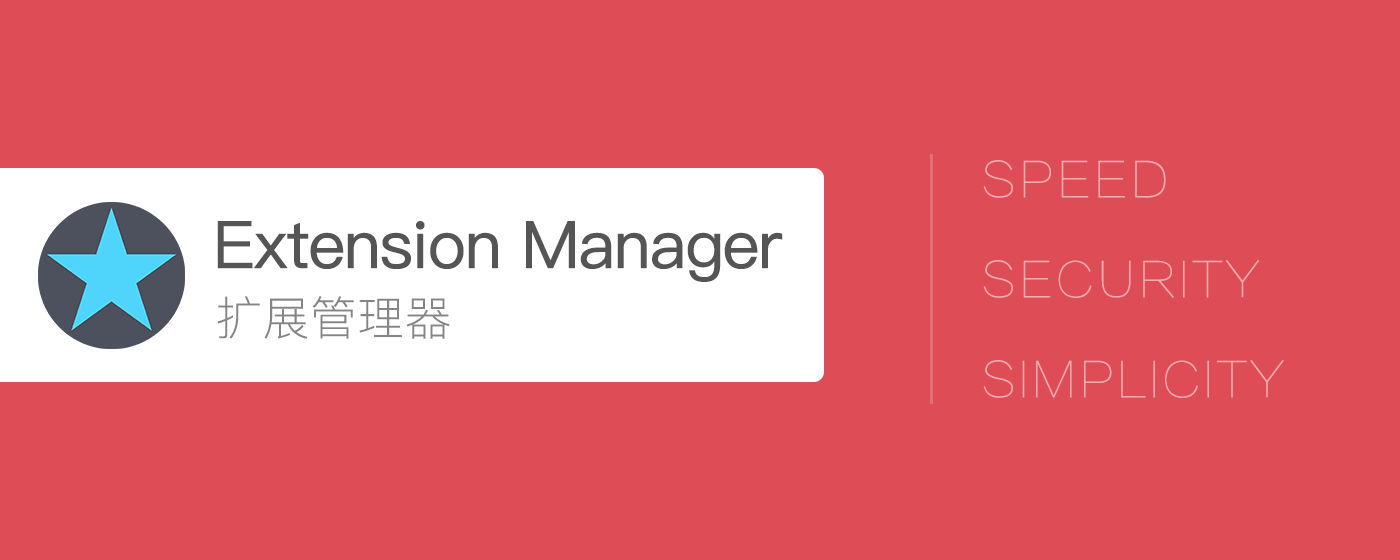
<style>
.page{position:relative;width:1400px;height:560px;background:#de4d56}
.page>*{position:absolute;margin:0}
.t1{font:48px/100px "FZLTCXHJW--GB1-0";color:#f5abb2;font-weight:bold}
.t2{font:65.3px "PingFangSC-Regular";letter-spacing:-0.04em;color:#555555;font-weight:bold}
.t3{font:46.1px "PingFangSC-Thin";color:#868585;font-weight:bold}
</style>
<div class="page">
<p class="t1" style="left:983px;top:160px;width:301px;height:238px">SPEED<br>SECURITY<br>SIMPLICITY</p>
<p class="t2" style="left:217px;top:221px;width:566px;height:61px">Extension Manager</p>
<p class="t3" style="left:217px;top:296px;width:233px;height:43px">扩展管理器</p>
</div>
